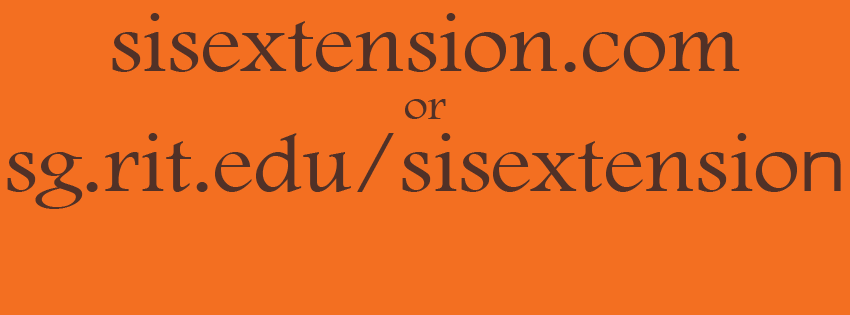
<style>
.page{position:relative;width:850px;height:315px;background:#f36f21}
.page>*{position:absolute;margin:0}
.t1{font:83.7px/72px "FootlightMTLight";color:#513127;scale:1.1 1}
.t2{font:83.7px/48px "FootlightMTLight";color:#513127;scale:1.1 1}
.t3{font:43.7px/48px "FootlightMTLight";color:#513127;scale:1.1 1}
.t4{font:83.7px/72px "EurostileRegular";color:#513127;scale:1.1 1}
</style>
<div class="page">
<p class="t1" style="left:7px;top:13px;width:834px;height:196px;text-align:center"><span class="t2">sisextension.com<br></span><span class="t3">or<br></span>sg.rit.edu/sisextensio<span class="t4">n</span></p>
</div>
